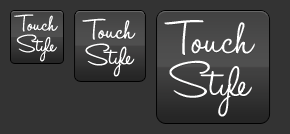
<style>
.page{position:relative;width:290px;height:134px;background:#333333}
.page>*{position:absolute;margin:0}
.t1{font:27px/21px "HaloHandletter";color:#ffffff}
.t2{font:33px/26px "HaloHandletter";color:#ffffff}
.t3{font:56px/43px "HaloHandletter";color:#ffffff}
</style>
<div class="page">
<p class="t1" style="left:14px;top:14px;width:44px;height:48px;text-align:center">Touch<br>Style</p>
<p class="t2" style="left:82px;top:18px;width:54px;height:59px;text-align:center">Touch<br>Style</p>
<p class="t3" style="left:164px;top:20px;width:91px;height:97px;text-align:center">Touch<br>Style</p>
</div>
